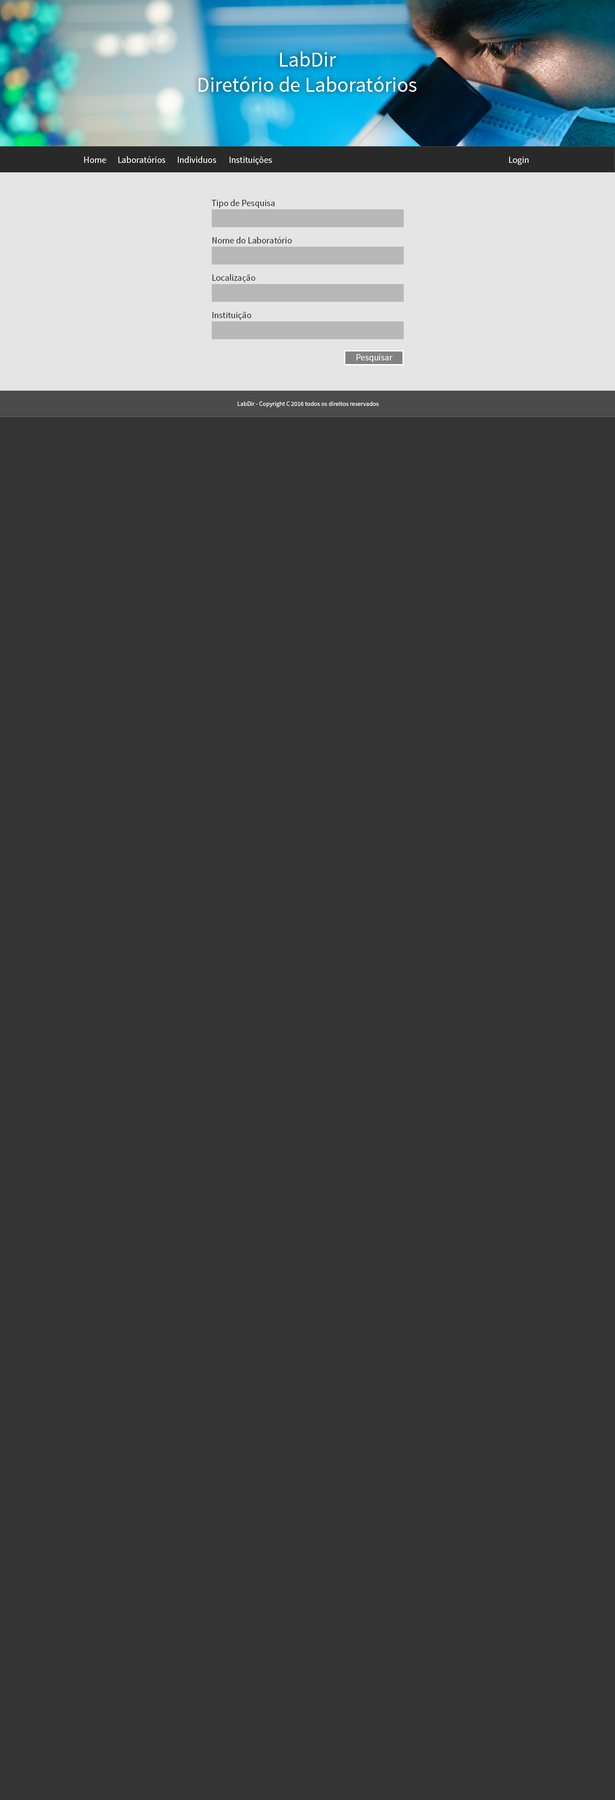
<style>
.page{position:relative;width:615px;height:1800px;background:#333333}
.page>*{position:absolute;margin:0}
.t1{font:21px "SourceSansPro-Regular";color:#ffffff}
.t2{font:9px "SourceSansPro-Regular";color:#ffffff}
.t3{font:9px "SourceSansPro-Regular";color:#292929}
.t4{font:6.3px "SourceSansPro-Regular";color:#ffffff}
</style>
<div class="page">
<p class="t1" style="left:198px;top:51px;width:218px;height:41px;text-align:center">LabDir<br>Diretório de Laboratórios</p>
<p class="t2" style="left:84px;top:157px;width:22px;height:6px">Home</p>
<p class="t2" style="left:118px;top:156px;width:47px;height:7px">Laboratórios</p>
<p class="t2" style="left:178px;top:156px;width:38px;height:7px">Individuos</p>
<p class="t2" style="left:230px;top:157px;width:42px;height:8px">Instituições</p>
<p class="t2" style="left:509px;top:157px;width:19px;height:8px">Login</p>
<p class="t3" style="left:212px;top:199px;width:62px;height:9px">Tipo de Pesquisa</p>
<p class="t3" style="left:212px;top:237px;width:80px;height:6px">Nome do Laboratório</p>
<p class="t3" style="left:212px;top:274px;width:43px;height:9px">Localização</p>
<p class="t3" style="left:212px;top:312px;width:39px;height:8px">Instituição</p>
<p class="t2" style="left:356px;top:354px;width:36px;height:8px">Pesquisar</p>
<p class="t4" style="left:238px;top:401px;width:140px;height:6px">LabDir - Copyright C 2016 todos os direitos reservados</p>
</div>
